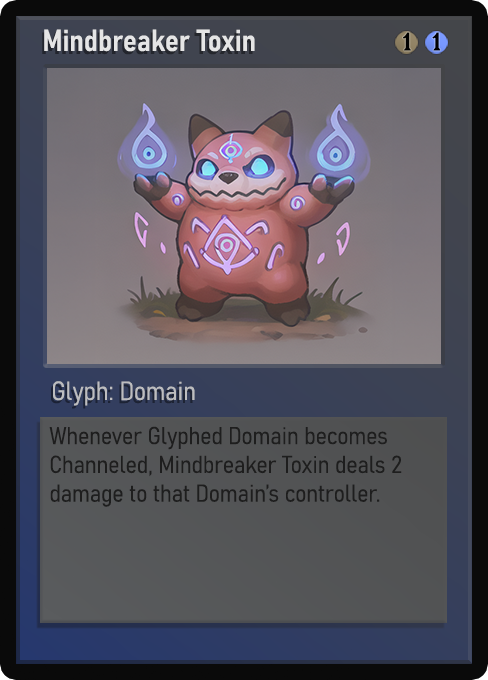
<style>
.page{position:relative;width:488px;height:680px}
.page>*{position:absolute;margin:0}
.t1{font:30px "Bahnschrift-SemiBoldSemiCondensed";color:#f2f2f2;font-weight:bold}
.t2{font:25px "WTRRoycroft";color:#000000;font-weight:bold;scale:1.09 1}
.t3{font:26px "Bahnschrift-LightSemiCondensed";color:#c8c8c8;font-weight:bold}
.t4{font:24px "Bahnschrift-LightSemiCondensed";color:#1e1e1e;font-weight:bold}
</style>
<div class="page">
<p class="t1" style="left:44px;top:29px;width:211px;height:23px;opacity:0.9">Mindbreaker Toxin</p>
<p class="t2" style="left:403px;top:32px;width:8px;height:19px">1</p>
<p class="t2" style="left:432px;top:32px;width:9px;height:19px">1</p>
<p class="t3" style="left:53px;top:381px;width:142px;height:25px;opacity:0.9">Glyph: Domain</p>
<p class="t4" style="left:49px;top:426px;width:353px;height:81px">Whenever Glyphed Domain becomes Channeled, Mindbreaker Toxin deals 2 damage to that Domain’s controller.</p>
</div>
